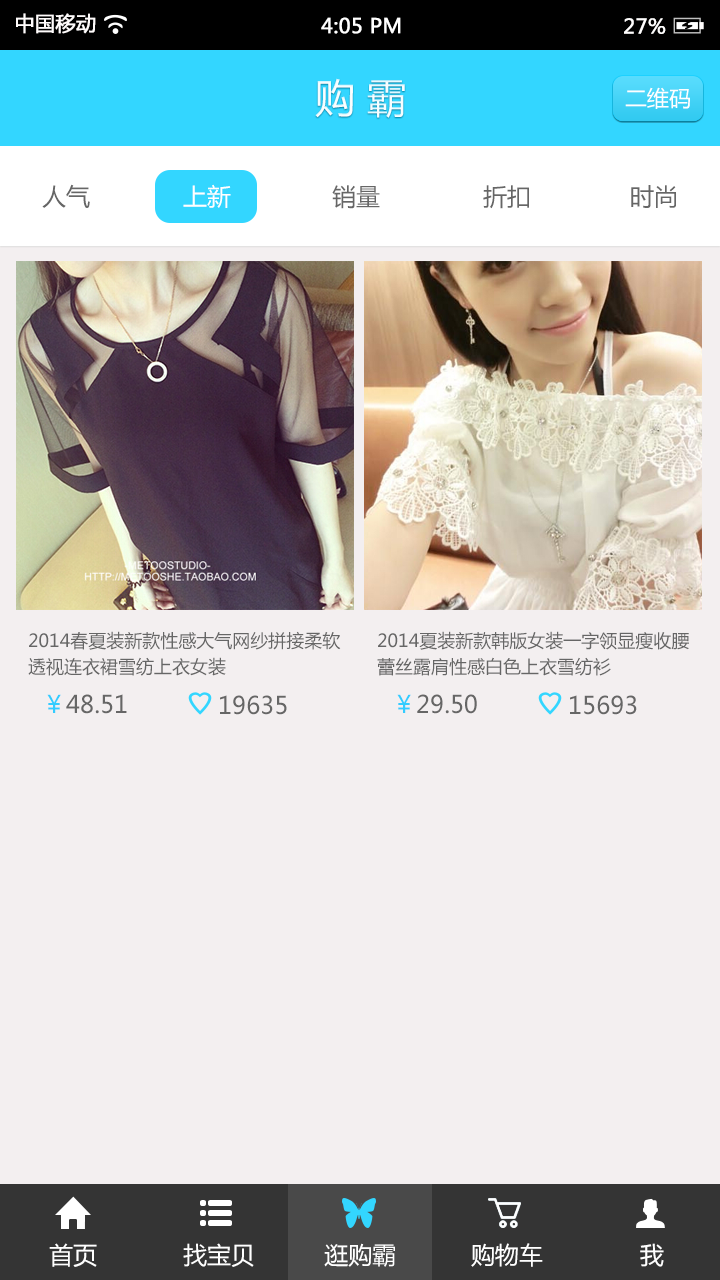
<style>
.page{position:relative;width:720px;height:1280px;background:#f3eff0}
.page>*{position:absolute;margin:0}
.t1{font:20px "MicrosoftYaHei";color:#fffcfc;font-weight:bold}
.t2{font:20px "MicrosoftYaHei";color:#ffffff;font-weight:bold}
.t3{font:20px "MicrosoftYaHei";color:#fffefe;font-weight:bold}
.t4{font:40px "MicrosoftYaHei";color:#ffffff}
.t5{font:22px "MicrosoftYaHei";color:#ffffff}
.t6{font:24px "MicrosoftYaHei";color:#666666}
.t7{font:24px "MicrosoftYaHei";color:#ffffff}
.t8{font:18px/26px "MicrosoftYaHei";color:#666666}
.t9{font:24px "MicrosoftYaHei";color:#33ccff}
</style>
<div class="page">
<p class="t1" style="left:16px;top:13px;width:80px;height:21px">中国移动</p>
<p class="t2" style="left:321px;top:17px;width:80px;height:17px">4:05 PM</p>
<p class="t3" style="left:624px;top:18px;width:42px;height:16px">27%</p>
<p class="t4" style="left:315px;top:78px;width:90px;height:40px">购 霸</p>
<p class="t5" style="left:625px;top:87px;width:65px;height:22px">二维码</p>
<p class="t6" style="left:42px;top:184px;width:48px;height:24px">人气</p>
<p class="t7" style="left:183px;top:184px;width:48px;height:24px">上新</p>
<p class="t6" style="left:332px;top:185px;width:48px;height:24px">销量</p>
<p class="t6" style="left:483px;top:185px;width:46px;height:24px">折扣</p>
<p class="t6" style="left:631px;top:185px;width:45px;height:23px">时尚</p>
<p class="t8" style="left:28px;top:631px;width:313px;height:45px">2014春夏装新款性感大气网纱拼接柔软<br>透视连衣裙雪纺上衣女装</p>
<p class="t8" style="left:377px;top:631px;width:312px;height:45px">2014夏装新款韩版女装一字领显瘦收腰<br>蕾丝露肩性感白色上衣雪纺衫</p>
<p class="t6" style="left:47px;top:694px;width:80px;height:20px"><span class="t9">￥</span>48.51</p>
<p class="t6" style="left:220px;top:695px;width:67px;height:20px">19635</p>
<p class="t6" style="left:397px;top:694px;width:80px;height:20px"><span class="t9">￥</span>29.50</p>
<p class="t6" style="left:570px;top:695px;width:67px;height:20px">15693</p>
<p class="t7" style="left:49px;top:1243px;width:48px;height:24px">首页</p>
<p class="t7" style="left:183px;top:1243px;width:71px;height:24px">找宝贝</p>
<p class="t7" style="left:324px;top:1243px;width:71px;height:24px">逛购霸</p>
<p class="t7" style="left:471px;top:1243px;width:72px;height:24px">购物车</p>
<p class="t7" style="left:640px;top:1243px;width:24px;height:24px">我</p>
</div>
